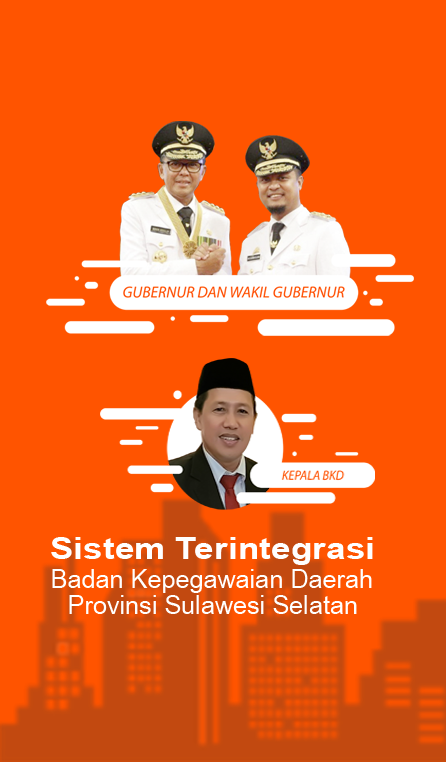
<style>
.page{position:relative;width:446px;height:762px;background:#ff5400}
.page>*{position:absolute;margin:0}
.t1{font:31px "Arial-BoldMT";color:#ffffff;scale:1.14 1}
.t2{font:25.8px "ArialNarrow";color:#ffffff;scale:1.19 1}
</style>
<div class="page">
<p class="t1" style="left:51px;top:537px;width:322px;height:28px">Sistem Terintegrasi</p>
<p class="t2" style="left:52px;top:569px;width:320px;height:24px">Badan Kepegawaian Daerah</p>
<p class="t2" style="left:69px;top:595px;width:288px;height:19px">Provinsi Sulawesi Selatan</p>
</div>
